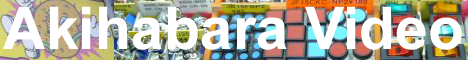
<style>
.page{position:relative;width:468px;height:60px;background:#ffffff}
.page>*{position:absolute;margin:0}
.t1{font:59px "Arial-BoldMT";color:#ffffff}
</style>
<div class="page">
<p class="t1" style="left:3px;top:6px;width:459px;height:44px">Akihabara Video</p>
</div>
